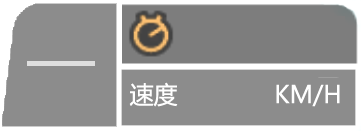
<style>
.page{position:relative;width:361px;height:131px;background:#8c8c8c}
.page>*{position:absolute;margin:0}
.t1{font:24px "MicrosoftYaHei";color:#ffffff}
</style>
<div class="page">
<p class="t1" style="left:129px;top:82px;width:49px;height:25px">速度</p>
<p class="t1" style="left:276px;top:84px;width:64px;height:23px">KM/H</p>
</div>
